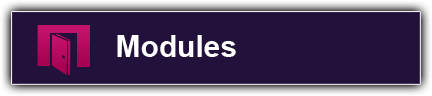
<style>
.page{position:relative;width:432px;height:96px;background:#22113a}
.page>*{position:absolute;margin:0}
.t1{font:30px "Arial-BoldMT";color:#ffffff}
</style>
<div class="page">
<p class="t1" style="left:117px;top:35px;width:119px;height:22px">Modules</p>
</div>
